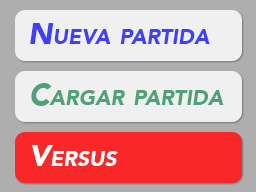
<style>
.page{position:relative;width:256px;height:192px;background:#f0f0f0}
.page>*{position:absolute;margin:0}
.t1{font:30px "Avenir-BlackOblique";color:#4040f8;font-variant:small-caps}
.t2{font:30px "Avenir-BlackOblique";color:#50a078;font-variant:small-caps}
.t3{font:30px "Avenir-BlackOblique";color:#ffffff;font-variant:small-caps}
</style>
<div class="page">
<p class="t1" style="left:30px;top:23px;width:180px;height:21px">Nueva partida</p>
<p class="t2" style="left:31px;top:83px;width:193px;height:23px">Cargar partida</p>
<p class="t3" style="left:32px;top:145px;width:86px;height:21px">Versus</p>
</div>
